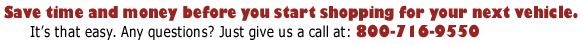
<style>
.page{position:relative;width:582px;height:45px;background:#ffffff}
.page>*{position:absolute;margin:0}
.t1{font:16.2px "GillSans-UltraBold";letter-spacing:0.025em;color:#992522;scale:0.8 1}
.t2{font:15px "Verdana";letter-spacing:0.025em;color:#000000;scale:0.8 1}
</style>
<div class="page">
<p class="t1" style="left:4px;top:5px;width:574px;height:16px">Save time and money before you start shopping for your next vehicle.</p>
<p class="t2" style="left:30px;top:25px;width:320px;height:15px">It’s that easy. Any questions? Just give us a call at:</p>
<p class="t1" style="left:356px;top:24px;width:123px;height:14px">800-716-9550</p>
</div>
